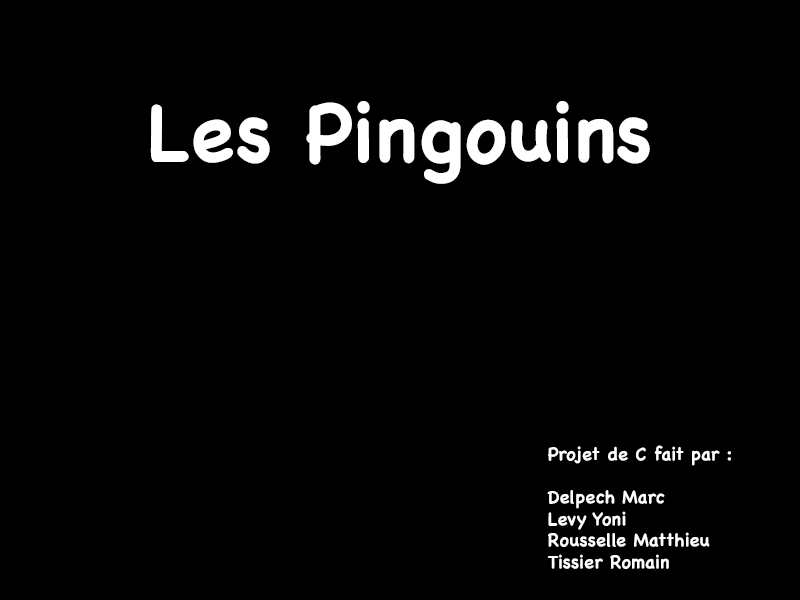
<style>
.page{position:relative;width:800px;height:600px;background:#000000}
.page>*{position:absolute;margin:0}
.t1{font:80px "Chalkboard-Bold";color:#ffffff}
.t2{font:18px "Chalkboard-Bold";color:#ffffff}
</style>
<div class="page">
<p class="t1" style="left:150px;top:101px;width:500px;height:83px">Les Pingouins</p>
<p class="t2" style="left:547px;top:445px;width:184px;height:124px">Projet de C fait par :<br><br>Delpech Marc<br>Levy Yoni<br>Rousselle Matthieu<br>Tissier Romain</p>
</div>
